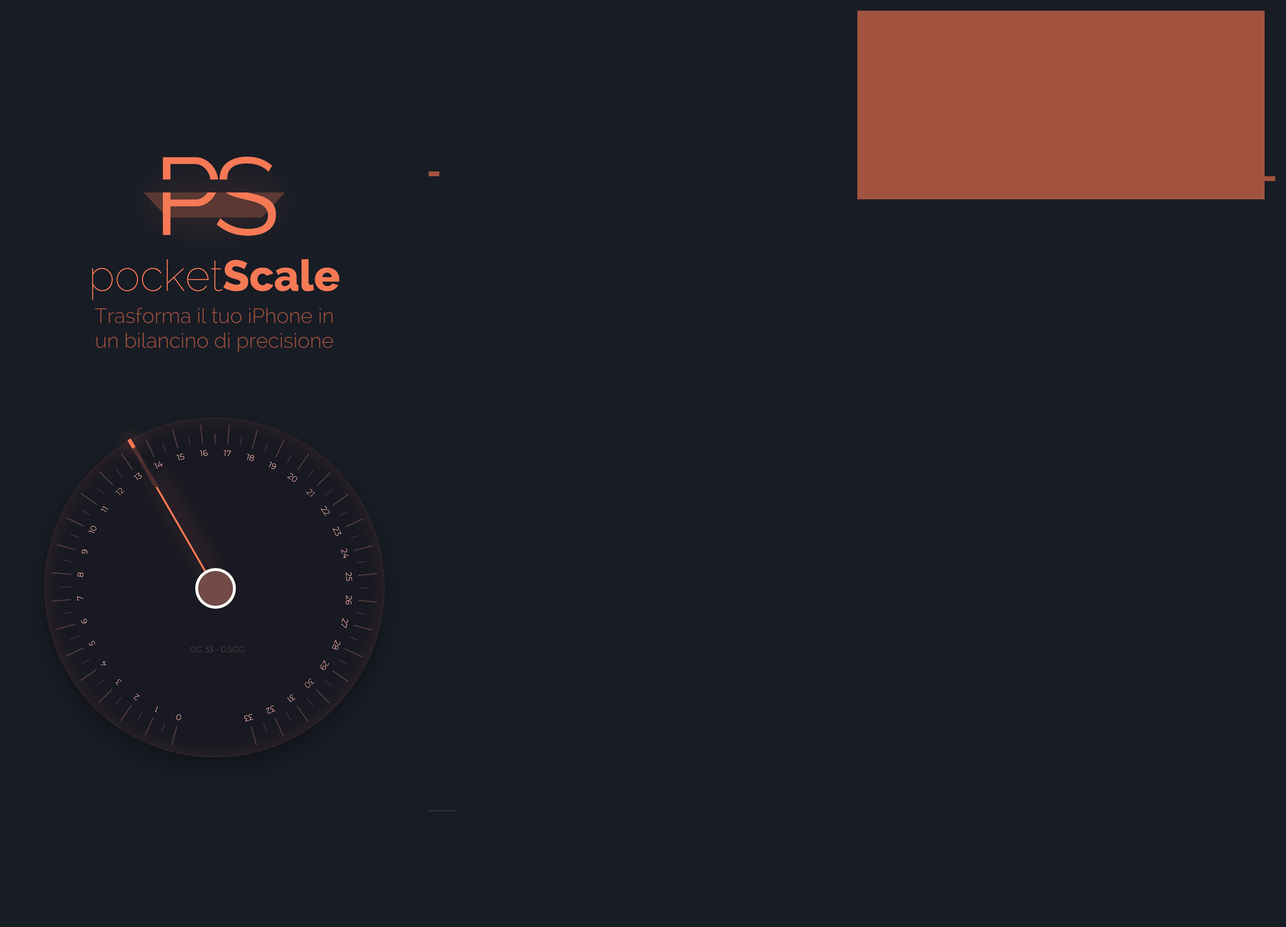
<style>
.page{position:relative;width:1286px;height:927px;background:#181c25}
.page>*{position:absolute;margin:0}
.t1{font:43.1px "Raleway-Thin";color:#f67955}
.t2{font:43.1px "Raleway-ExtraBold";color:#f67955}
.t3{font:20.6px "Raleway-Light";color:#9b503e}
</style>
<div class="page">
<p class="t1" style="left:92px;top:259px;width:247px;height:41px">pocket<span class="t2">Scale</span></p>
<p class="t3" style="left:95px;top:308px;width:238px;height:44px;text-align:center">Trasforma il tuo iPhone in<br>un bilancino di precisione</p>
</div>
